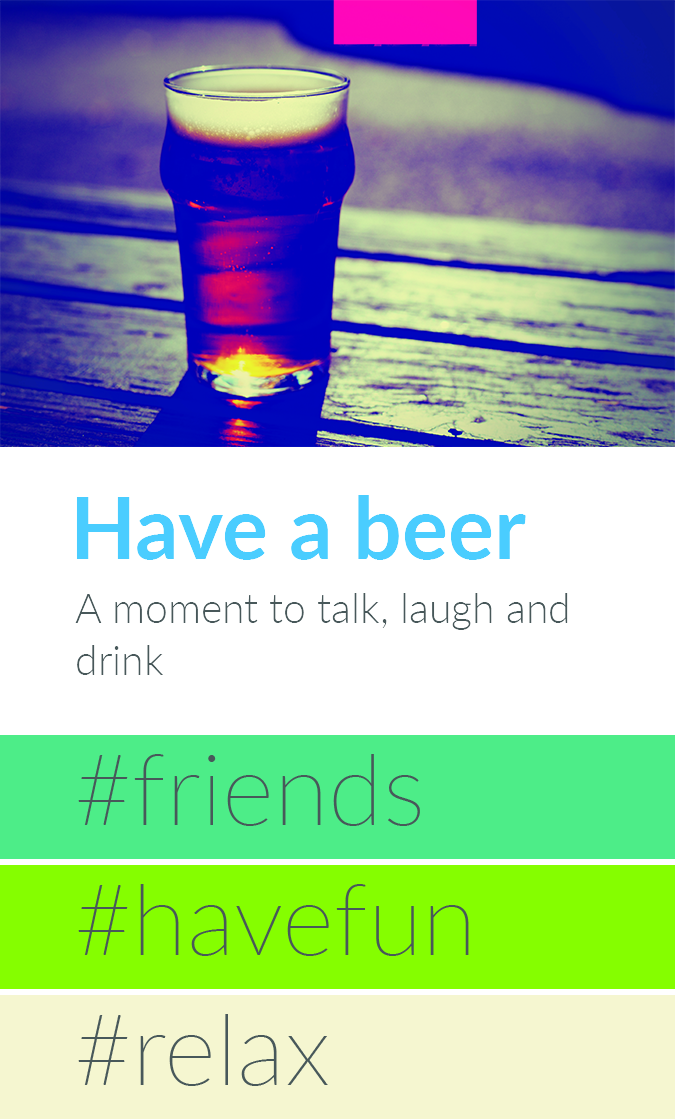
<style>
.page{position:relative;width:675px;height:1119px;background:#ffffff}
.page>*{position:absolute;margin:0}
.t1{font:86px "Lato-Bold";color:#4acdff}
.t2{font:41px/52px "Lato-Light";color:#48585a}
</style>
<div class="page">
<p class="t1" style="left:76px;top:495px;width:450px;height:65px">Have a beer</p>
<p class="t2" style="left:75px;top:593px;width:493px;height:82px;text-align:right">A moment to talk, laugh and drink</p>
</div>
